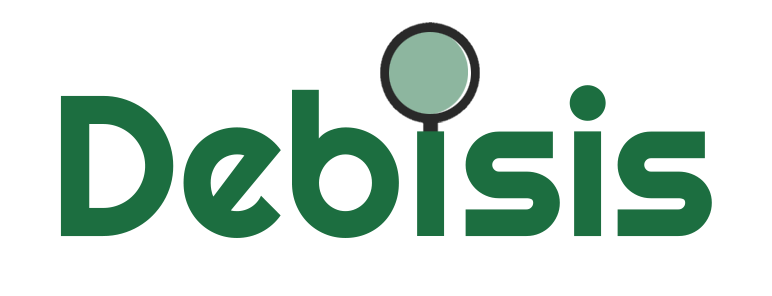
<style>
.page{position:relative;width:772px;height:296px;background:#ffffff}
.page>*{position:absolute;margin:0}
.t1{font:200px "Righteous-Regular";color:#1c6e40}
.t2{font:200px "Righteous-Regular";letter-spacing:0.04em;color:#1c6e40}
</style>
<div class="page">
<p class="t1" style="left:60px;top:85px;width:652px;height:153px">Deb sis</p>
<p class="t2" style="left:417px;top:131px;width:28px;height:105px">ı</p>
</div>
